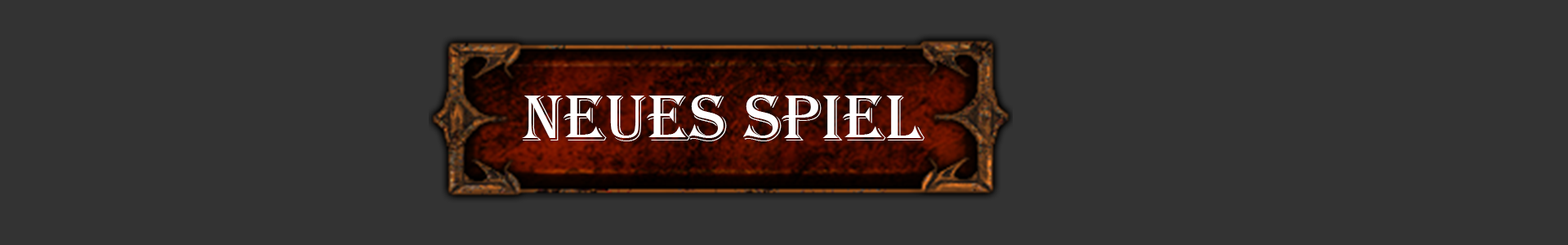
<style>
.page{position:relative;width:1568px;height:245px;background:#333333}
.page>*{position:absolute;margin:0}
.t1{font:68.1px "Algerian";color:#fefefe}
</style>
<div class="page">
<p class="t1" style="left:522px;top:95px;width:402px;height:46px">Neues SPiel</p>
</div>
